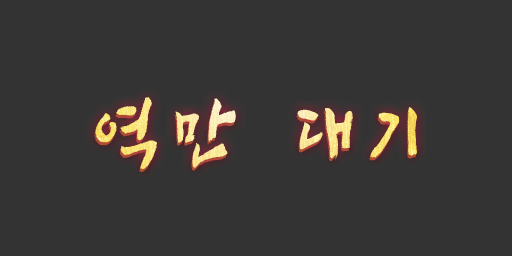
<style>
.page{position:relative;width:512px;height:256px;background:#333333}
.page>*{position:absolute;margin:0}
.t1{font:82.3px "SangSangRockOTF";letter-spacing:0.26em;scale:0.8 1}
</style>
<div class="page">
<p class="t1" style="left:95px;top:97px;width:322px;height:73px">역만 대기</p>
</div>
